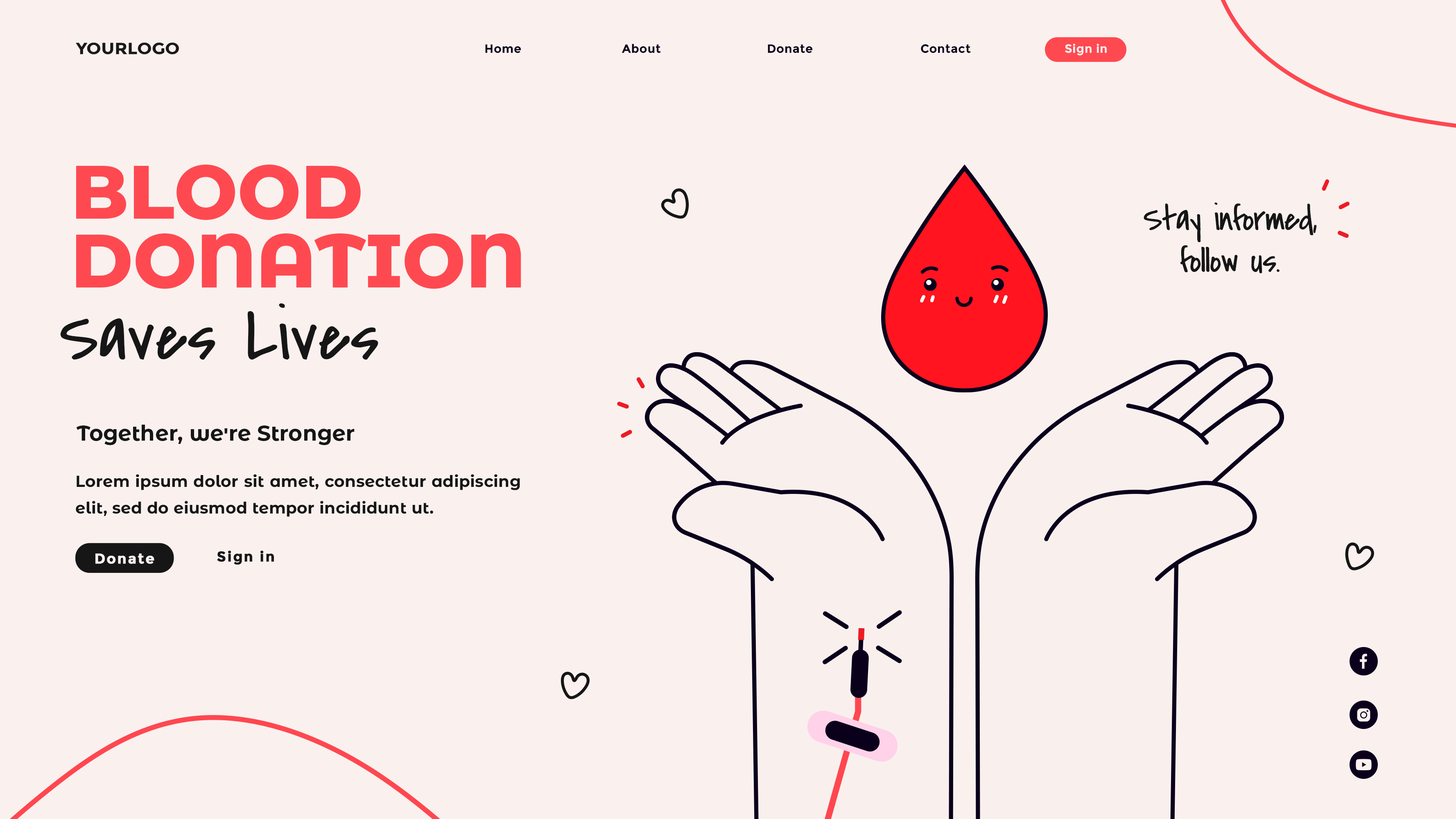
<style>
.page{position:relative;width:1456px;height:819px;background:#faf1ef}
.page>*{position:absolute;margin:0}
.t1{font:11.9px "Montserrat-Bold";letter-spacing:0.025em;color:#0b001c}
.t2{font:11.9px "Montserrat-Bold";letter-spacing:0.025em;color:#faf1ef}
.t3{font:75.2px/68.6px "MontserratAlternates-ExtraBold";color:#ff4951}
.t4{font:36px/42px "CoveredByYourGrace";letter-spacing:-0.025em;color:#161616}
.t5{font:73.4px "CoveredByYourGrace";color:#161616}
.t6{font:21.3px "MontserratAlternates-Bold";color:#161616}
.t7{font:16px/26.6px "MontserratAlternates-Bold";letter-spacing:0.01em;color:#161616}
.t8{font:14.2px "Montserrat-Bold";letter-spacing:0.075em;color:#faf1ef;font-weight:bold}
.t9{font:14.2px "Montserrat-Bold";letter-spacing:0.075em;color:#161616;font-weight:bold}
</style>
<div class="page">
<p class="t1" style="left:485px;top:44px;width:36px;height:9px">Home</p>
<p class="t1" style="left:622px;top:44px;width:39px;height:9px">About</p>
<p class="t1" style="left:768px;top:44px;width:44px;height:9px">Donate</p>
<p class="t1" style="left:921px;top:44px;width:50px;height:9px">Contact</p>
<p class="t2" style="left:1065px;top:43px;width:42px;height:13px">Sign in</p>
<p class="t3" style="left:76px;top:164px;width:445px;height:125px">BLOOD <br>DONATION</p>
<p class="t4" style="left:1144px;top:202px;width:173px;height:72px;text-align:center">Stay informed,<br>follow us.</p>
<p class="t5" style="left:60px;top:303px;width:318px;height:57px">Saves Lives</p>
<p class="t6" style="left:76px;top:425px;width:279px;height:20px">Together, we're Stronger</p>
<p class="t7" style="left:76px;top:474px;width:444px;height:43px;text-align:justify">Lorem ipsum dolor sit amet, consectetur adipiscing elit, sed do eiusmod tempor incididunt ut.</p>
<p class="t8" style="left:95px;top:553px;width:59px;height:11px">Donate</p>
<p class="t9" style="left:217px;top:550px;width:57px;height:15px">Sign in</p>
</div>
